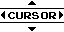
<style>
.page{position:relative;width:64px;height:32px;background:#ffffff}
.page>*{position:absolute;margin:0}
.t1{font:14px "ArcadeClassic";color:#000000;scale:1.05 1}
</style>
<div class="page">
<p class="t1" style="left:8px;top:12px;width:48px;height:7px">CURSOR</p>
</div>
